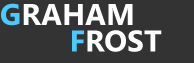
<style>
.page{position:relative;width:194px;height:63px;background:#333333}
.page>*{position:absolute;margin:0}
.t1{font:30px "SegoeUI-Bold";color:#ffffff;text-transform:uppercase}
.t2{font:30px "SegoeUI-Bold";color:#4bcaff;text-transform:uppercase}
</style>
<div class="page">
<p class="t1" style="left:1px;top:3px;width:132px;height:23px"><span class="t2">G</span>rahaM</p>
<p class="t1" style="left:72px;top:30px;width:90px;height:22px"><span class="t2">F</span>rost</p>
</div>
